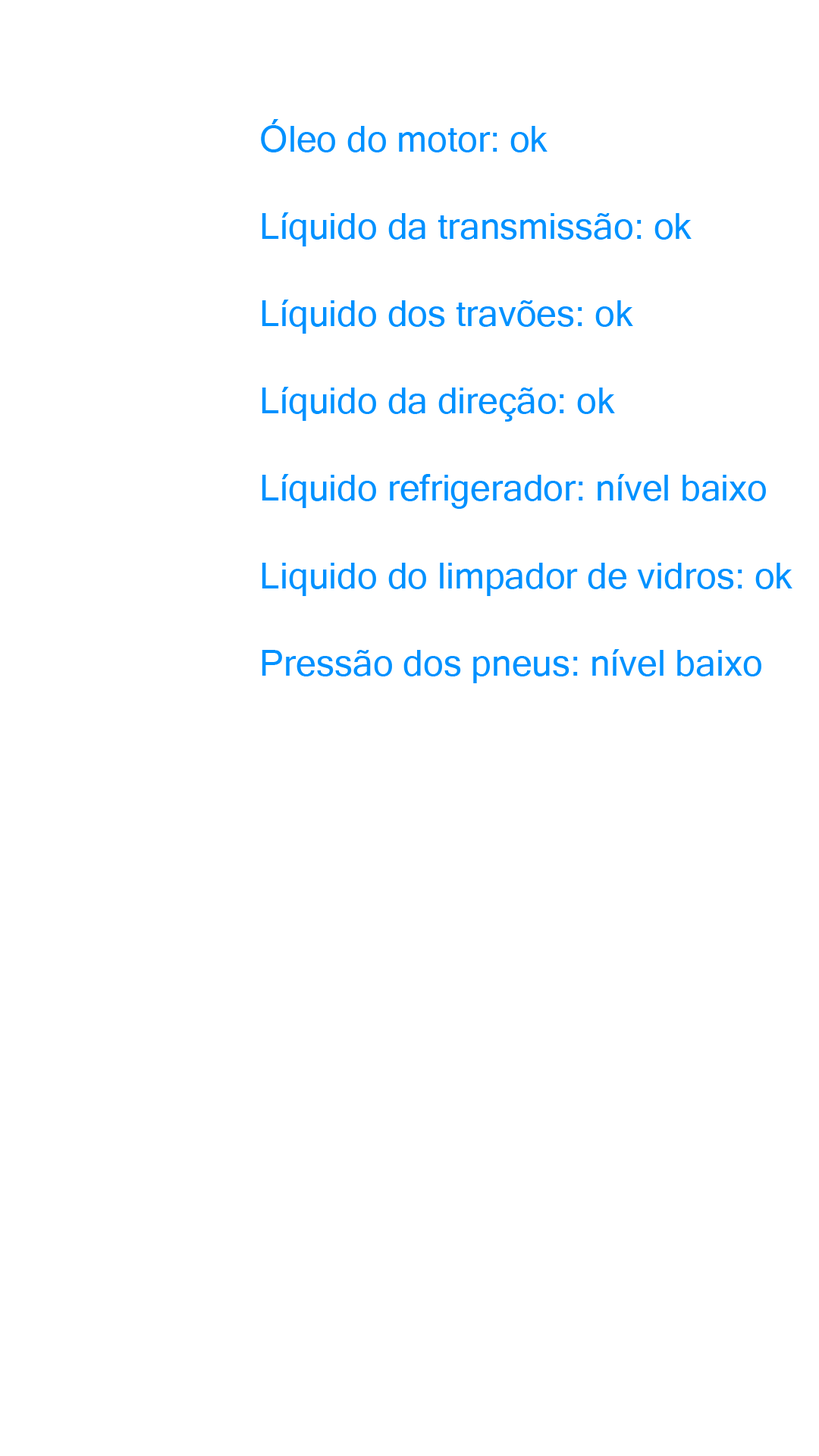
<style>
.page{position:relative;width:819px;height:1456px;background:#ffffff}
.page>*{position:absolute;margin:0}
.t1{font:36.4px "MicrosoftSansSerif";color:#0091ff}
</style>
<div class="page">
<p class="t1" style="left:261px;top:119px;width:531px;height:564px">Óleo do motor: ok<br><br>Líquido da transmissão: ok<br><br>Líquido dos travões: ok<br><br>Líquido da direção: ok<br><br>Líquido refrigerador: nível baixo<br><br>Liquido do limpador de vidros: ok <br><br>Pressão dos pneus: nível baixo</p>
</div>
